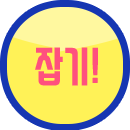
<style>
.page{position:relative;width:130px;height:130px;background:#fff257}
.page>*{position:absolute;margin:0}
.t1{font:48px "SwaggerTTF";color:#ff517e}
</style>
<div class="page">
<p class="t1" style="left:35px;top:47px;width:63px;height:39px">잡기!</p>
</div>
